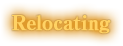
<style>
.page{position:relative;width:123px;height:46px}
.page>*{position:absolute;margin:0}
.t1{font:20px "RyuminPro-ExBold";letter-spacing:-0.04em;color:#ffd15f;font-weight:bold}
</style>
<div class="page">
<p class="t1" style="left:12px;top:15px;width:99px;height:19px;opacity:0.97">Relocating</p>
</div>
